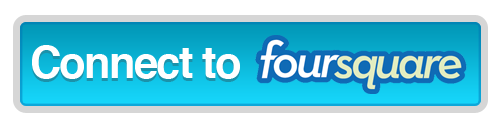
<style>
.page{position:relative;width:500px;height:123px;background:#ffffff}
.page>*{position:absolute;margin:0}
.t1{font:43.5px "Helvetica-Bold";letter-spacing:-0.04em;color:#ffffff}
</style>
<div class="page">
<p class="t1" style="left:32px;top:45px;width:208px;height:34px">Connect to</p>
</div>
